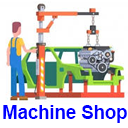
<style>
.page{position:relative;width:128px;height:128px;background:#ffffff}
.page>*{position:absolute;margin:0}
.t1{font:18.5px "Arial-BoldMT";color:#0000ff}
</style>
<div class="page">
<p class="t1" style="left:3px;top:105px;width:124px;height:18px">Machine Shop</p>
</div>
